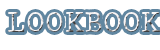
<style>
.page{position:relative;width:160px;height:50px;background:#ffffff}
.page>*{position:absolute;margin:0}
.t1{font:32px "PrestigeEliteStd-Bd"}
</style>
<div class="page">
<p class="t1" style="left:8px;top:12px;width:152px;height:20px">LOOKBOOK</p>
</div>
